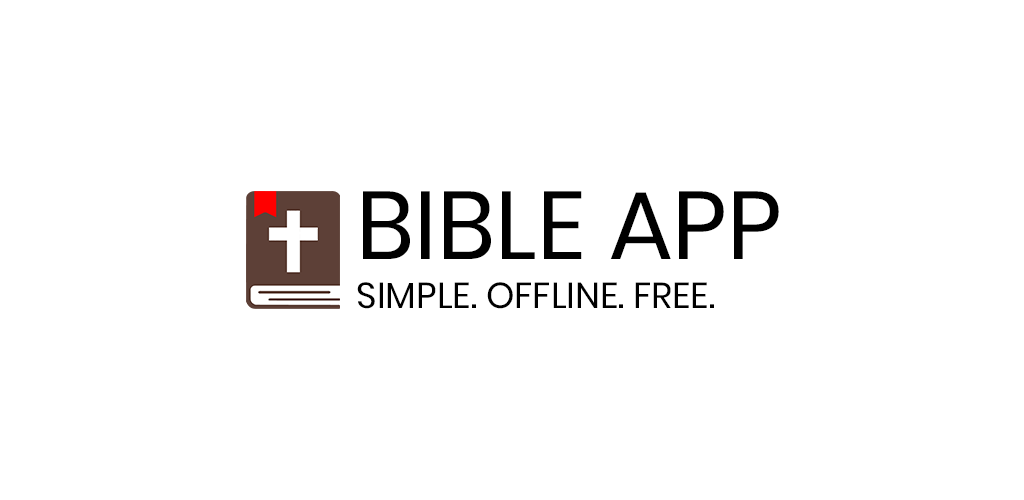
<style>
.page{position:relative;width:1024px;height:500px;background:#ffffff}
.page>*{position:absolute;margin:0}
.t1{font:96px "Poppins-Regular";color:#000000}
.t2{font:36px "Poppins-Regular";color:#000000}
</style>
<div class="page">
<p class="t1" style="left:363px;top:191px;width:416px;height:68px">BIBLE APP</p>
<p class="t2" style="left:357px;top:282px;width:357px;height:27px">SIMPLE. OFFLINE. FREE.</p>
</div>
